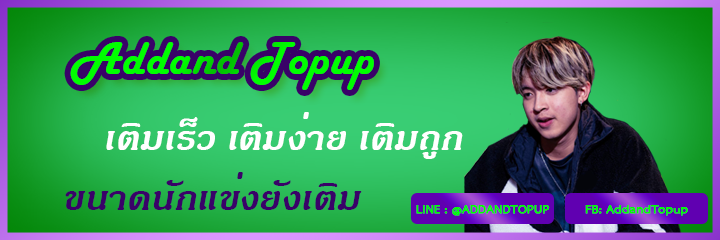
<style>
.page{position:relative;width:720px;height:240px}
.page>*{position:absolute;margin:0}
.t1{font:48px "HarlowSolid";letter-spacing:0.01em;color:#00ff00}
.t2{font:48px "JasmineDSEBoldItalic";color:#ffffff}
.t3{font:48px "JasmineDSEBoldItalic";color:#390268}
.t4{font:16.4px "THSarabunPSK-Bold";color:#00ff00;font-weight:bold}
</style>
<div class="page">
<p class="t1" style="left:70px;top:42px;width:304px;height:48px">Addand Topup</p>
<p class="t2" style="left:106px;top:112px;width:357px;height:47px">เติมเร็ว เติมง่าย เติมถูก</p>
<p class="t3" style="left:65px;top:172px;width:297px;height:38px">ขนาดนักแข่งยังเติม</p>
<p class="t4" style="left:416px;top:205px;width:134px;height:11px">LINE : @ADDANDTOPUP</p>
<p class="t4" style="left:585px;top:205px;width:103px;height:11px">FB: AddandTopup</p>
</div>
